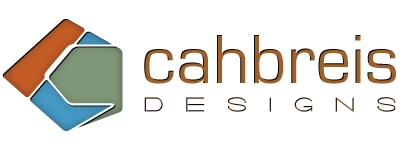
<style>
.page{position:relative;width:400px;height:150px;background:#ffffff}
.page>*{position:absolute;margin:0}
.t1{font:72px "EurostileRegular";color:#9e5f28}
.t2{font:21px "Salaryman";letter-spacing:1.05em}
</style>
<div class="page">
<p class="t1" style="left:144px;top:35px;width:252px;height:49px">cahbreis</p>
<p class="t2" style="left:144px;top:97px;width:252px;height:16px">Designs</p>
</div>
